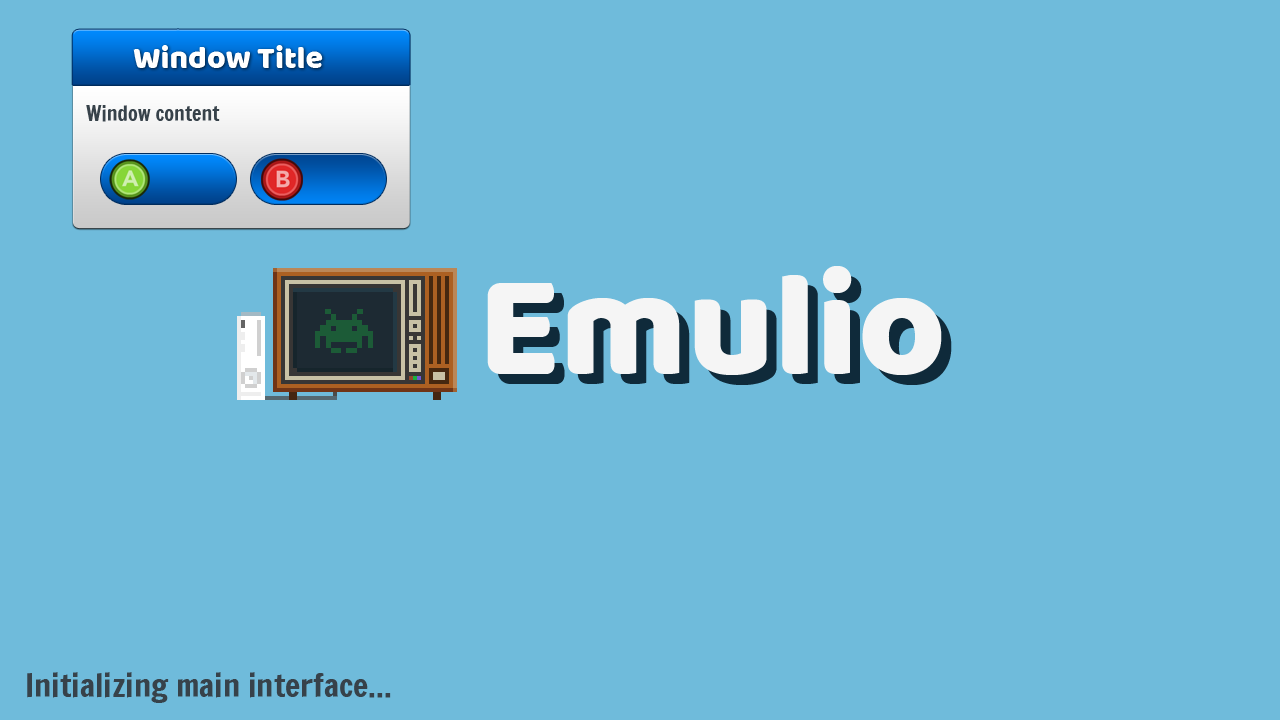
<style>
.page{position:relative;width:1280px;height:720px;background:#6fbbdb}
.page>*{position:absolute;margin:0}
.t1{font:32px "Baloo-Regular";color:#fffefe}
.t2{font:20px "FrancoisOne-Regular";color:#37424a}
.t3{font:150px "Baloo-Regular";color:#f5f5f5}
.t4{font:32px "FrancoisOne-Regular";color:#37424a}
</style>
<div class="page">
<p class="t1" style="left:133px;top:45px;width:190px;height:23px">Window Title</p>
<p class="t2" style="left:86px;top:105px;width:134px;height:17px">Window content</p>
<p class="t3" style="left:487px;top:266px;width:455px;height:109px">Emulio</p>
<p class="t4" style="left:27px;top:672px;width:364px;height:31px">Initializing main interface...</p>
</div>
